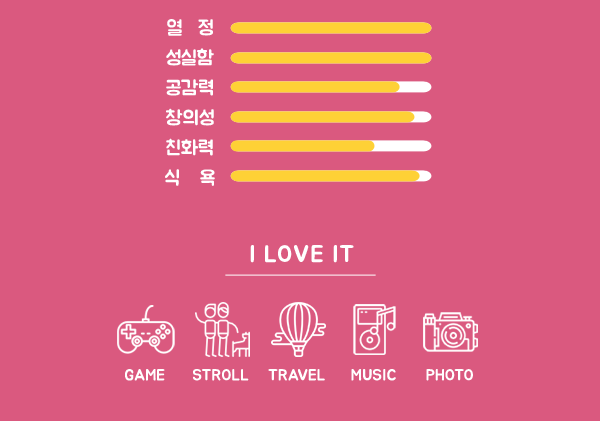
<style>
.page{position:relative;width:600px;height:421px;background:#da597f}
.page>*{position:absolute;margin:0}
.t1{font:20px/30px "BMJUA";color:#ffffff}
.t2{font:24px "BMJUA";letter-spacing:0.05em;color:#ffffff}
.t3{font:16px "BMJUA";color:#ffffff}
</style>
<div class="page">
<p class="t1" style="left:165px;top:19px;width:50px;height:167px;text-align:center">열   정<br>성실함<br>공감력<br>창의성<br>친화력<br>식    욕</p>
<p class="t2" style="left:250px;top:245px;width:104px;height:18px">I LOVE IT</p>
<p class="t3" style="left:125px;top:369px;width:40px;height:12px">GAME</p>
<p class="t3" style="left:193px;top:369px;width:56px;height:12px">STROLL</p>
<p class="t3" style="left:268px;top:369px;width:57px;height:12px">TRAVEL</p>
<p class="t3" style="left:351px;top:369px;width:45px;height:12px">MUSIC</p>
<p class="t3" style="left:426px;top:369px;width:47px;height:12px">PHOTO</p>
</div>
